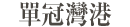
<style>
.page{position:relative;width:130px;height:27px;background:#ffffff}
.page>*{position:absolute;margin:0}
.t1{font:26px "RyuminPro-ExBold";color:#4c4843;scale:0.9 1}
</style>
<div class="page">
<p class="t1" style="left:19px;top:1px;width:93px;height:26px">單冠灣港</p>
</div>
